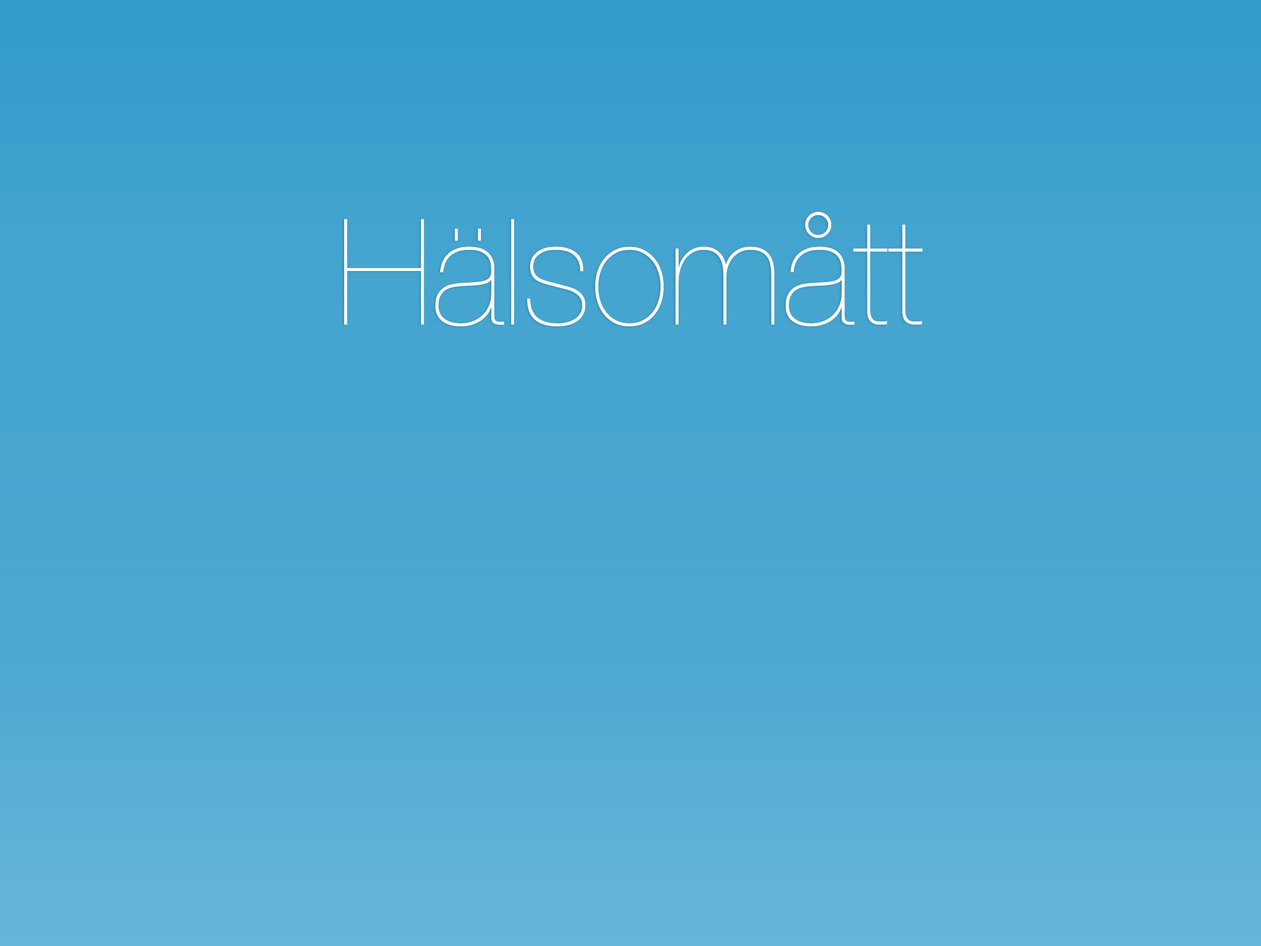
<style>
.page{position:relative;width:1261px;height:946px}
.page>*{position:absolute;margin:0}
.t1{font:147.8px "HelveticaNeue-UltraLight";color:#ffffff}
</style>
<div class="page">
<p class="t1" style="left:344px;top:212px;width:579px;height:114px">Hälsomått</p>
</div>
